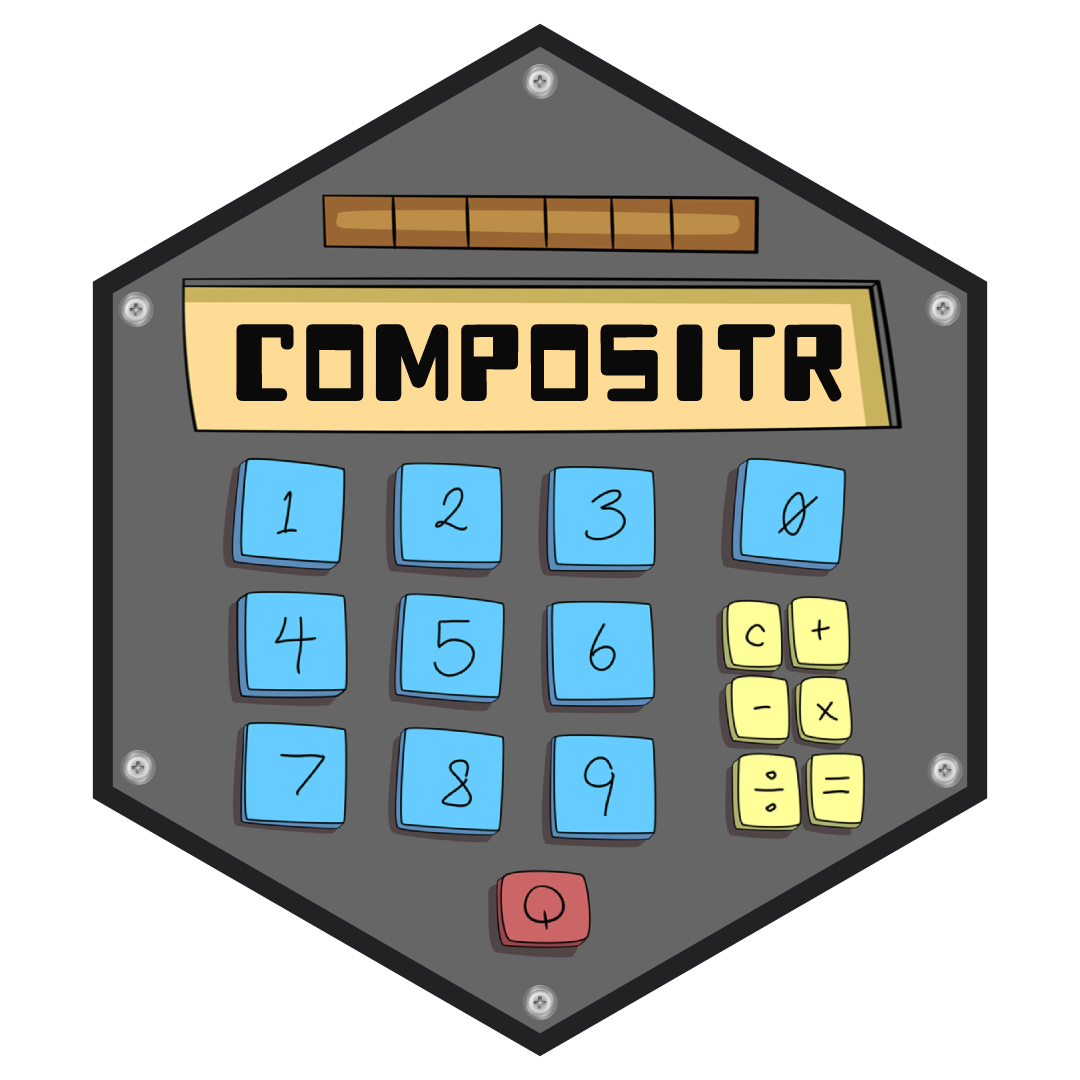
<style>
.page{position:relative;width:1080px;height:1080px;background:#ffffff}
.page>*{position:absolute;margin:0}
.t1{font:130px "HeavyData";color:#0b0a0a}
</style>
<div class="page">
<p class="t1" style="left:236px;top:324px;width:608px;height:80px">compositr</p>
</div>
